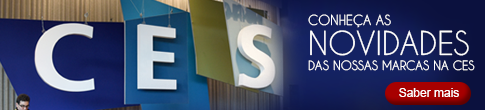
<style>
.page{position:relative;width:485px;height:110px}
.page>*{position:absolute;margin:0}
.t1{font:12px "CaviarDreams";color:#ffffff;text-transform:uppercase}
.t2{font:13.1px "CaviarDreams";color:#ffffff;text-transform:uppercase}
.t3{font:31.1px/30px "CaviarDreams";color:#ffffff;text-transform:uppercase}
.t4{font:12px "ArialMT";color:#ffffff}
</style>
<div class="page">
<p class="t1" style="left:308px;top:14px;width:167px;height:57px"><span class="t2">Conheça as <br></span><span class="t3">novidades <br></span>DAS NOSSAS MARCAS NA CES</p>
<p class="t4" style="left:399px;top:88px;width:60px;height:9px">Saber mais</p>
</div>
